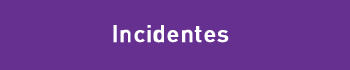
<style>
.page{position:relative;width:350px;height:70px;background:#663091}
.page>*{position:absolute;margin:0}
.t1{font:24px "DINPro-Medium";color:#ffffff;font-weight:bold}
</style>
<div class="page">
<p class="t1" style="left:113px;top:25px;width:116px;height:18px">Incidentes</p>
</div>
